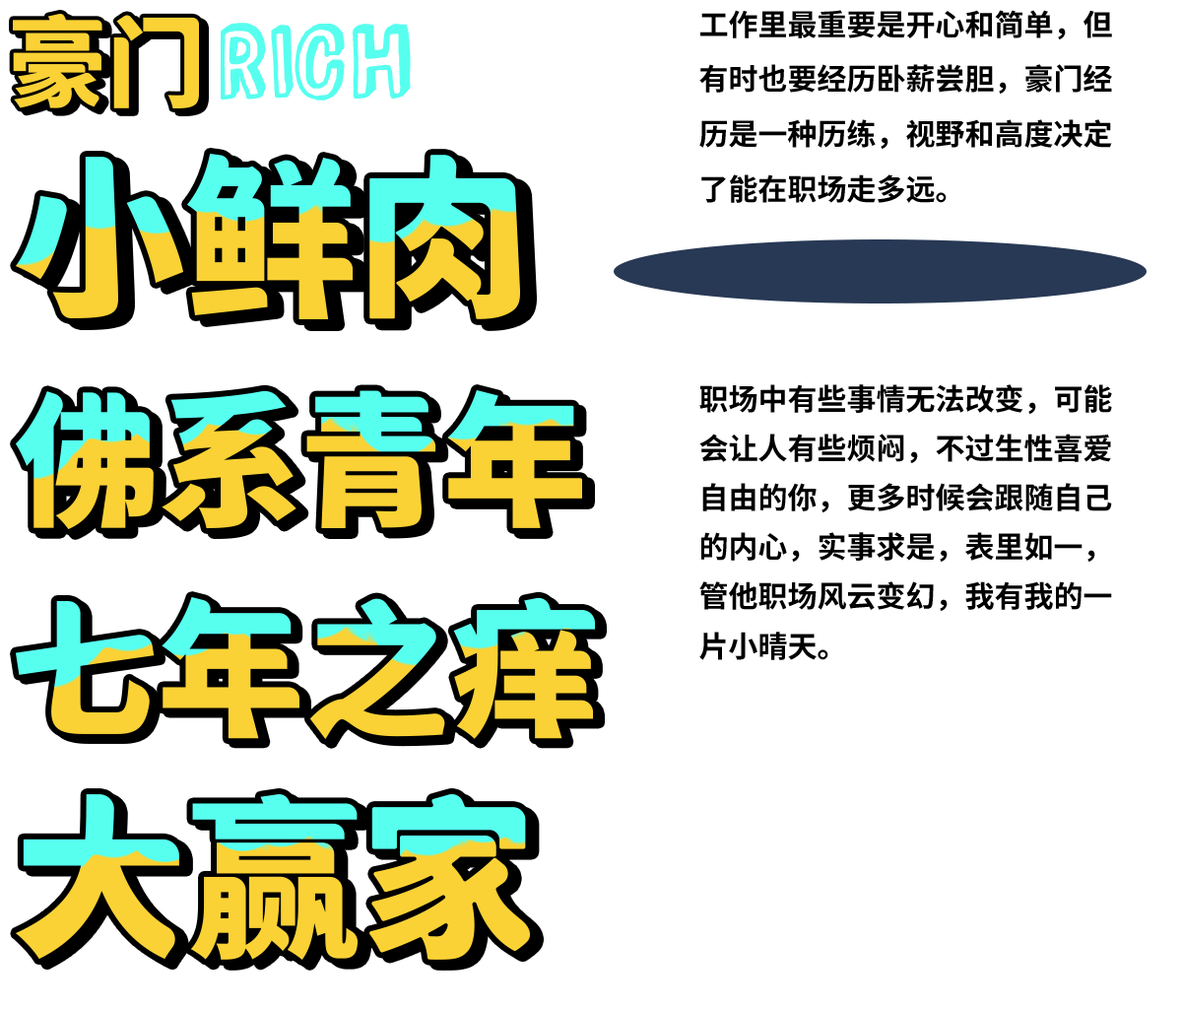
<style>
.page{position:relative;width:1182px;height:1009px;background:#ffffff}
.page>*{position:absolute;margin:0}
.t1{font:29.6px/54.9px "SourceHanSansCN-Bold";color:#000000}
.t2{font:121.4px "ComicZineOT";color:#57ffef}
.t3{font:29.6px/49.4px "SourceHanSansCN-Bold";color:#000000}
</style>
<div class="page">
<p class="t1" style="left:699px;top:10px;width:413px;height:193px">工作里最重要是开心和简单，但有时也要经历卧薪尝胆，豪门经历是一种历练，视野和高度决定了能在职场走多远。</p>
<p class="t2" style="left:221px;top:23px;width:190px;height:77px">RICH</p>
<p class="t3" style="left:699px;top:384px;width:413px;height:276px">职场中有些事情无法改变，可能会让人有些烦闷，不过生性喜爱自由的你，更多时候会跟随自己的内心，实事求是，表里如一，管他职场风云变幻，我有我的一片小晴天。</p>
</div>
